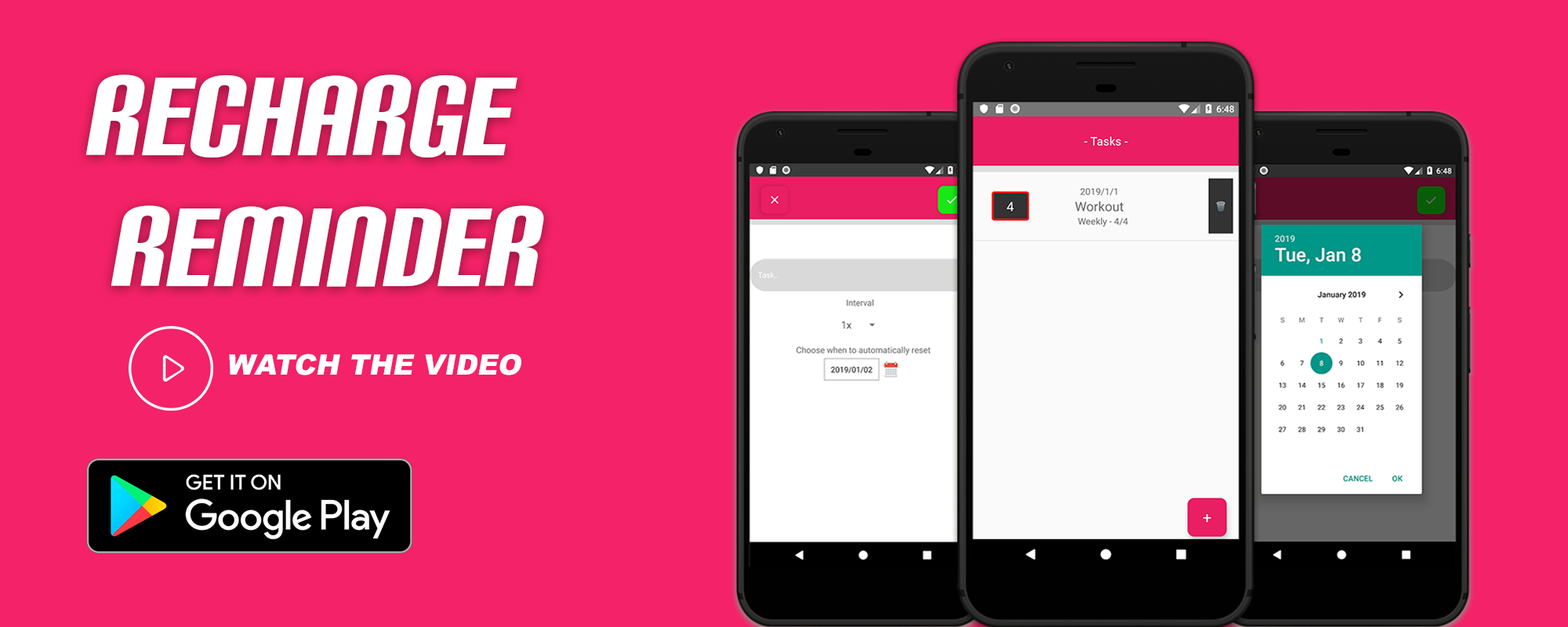
<style>
.page{position:relative;width:1568px;height:627px;background:#f42268}
.page>*{position:absolute;margin:0}
.t1{font:109.3px "CarbonBl-Regular";color:#ffffff;font-style:italic}
.t2{font:28.2px "Arial-Black";color:#ffffff;font-style:italic}
</style>
<div class="page">
<p class="t1" style="left:85px;top:74px;width:459px;height:213px">Recharge <br> Reminder</p>
<p class="t2" style="left:229px;top:354px;width:292px;height:22px">WATCH THE VIDEO</p>
</div>
